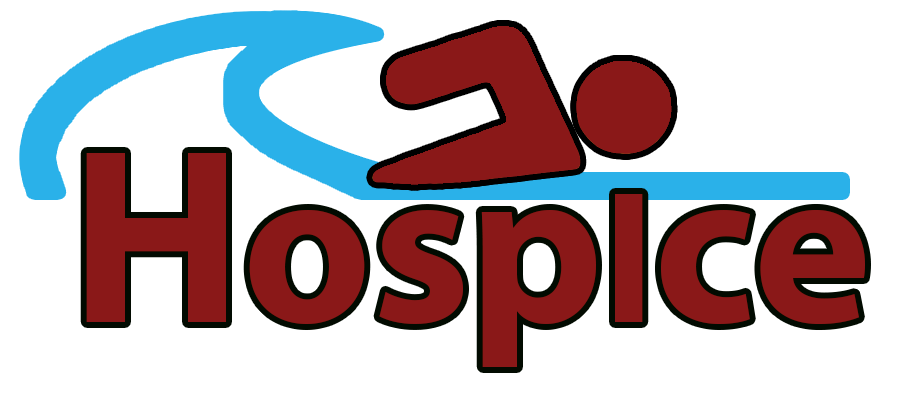
<style>
.page{position:relative;width:900px;height:420px;background:#ffffff}
.page>*{position:absolute;margin:0}
.t1{font:225px "MyriadPro-Bold";color:#8a1818}
.t2{font:250px "MyriadPro-Bold";color:#8a1818}
.t3{font:180px "MyriadPro-Bold";color:#8a1818}
</style>
<div class="page">
<p class="t1" style="left:86px;top:153px;width:779px;height:214px"><span class="t2">H</span>osp<span class="t3">l</span>ce</p>
</div>
